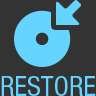
<style>
.page{position:relative;width:96px;height:96px;background:#333333}
.page>*{position:absolute;margin:0}
.t1{font:28px "HelveticaNeueLTStd-Cn";color:#65d5ff;text-transform:uppercase}
</style>
<div class="page">
<p class="t1" style="left:1px;top:76px;width:95px;height:20px">RESTORE</p>
</div>
